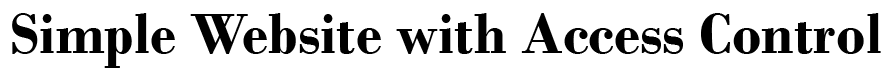
<style>
.page{position:relative;width:892px;height:73px;background:#ffffff}
.page>*{position:absolute;margin:0}
.t1{font:60px "BodoniMT-Bold";color:#000000}
</style>
<div class="page">
<p class="t1" style="left:12px;top:13px;width:869px;height:55px">Simple Website with Access Control</p>
</div>
